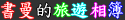
<style>
.page{position:relative;width:125px;height:20px;background:#333333}
.page>*{position:absolute;margin:0}
.t1{font:18px "DFKaiShu-SB-Estd-BF";color:#ffffff}
</style>
<div class="page">
<p class="t1" style="left:1px;top:2px;width:15px;height:17px">書</p>
<p class="t1" style="left:19px;top:2px;width:15px;height:17px">曼</p>
<p class="t1" style="left:37px;top:3px;width:14px;height:15px">的</p>
<p class="t1" style="left:53px;top:3px;width:18px;height:14px">旅</p>
<p class="t1" style="left:71px;top:3px;width:17px;height:15px">遊</p>
<p class="t1" style="left:90px;top:3px;width:16px;height:15px">相</p>
<p class="t1" style="left:108px;top:1px;width:15px;height:18px">簿</p>
</div>
